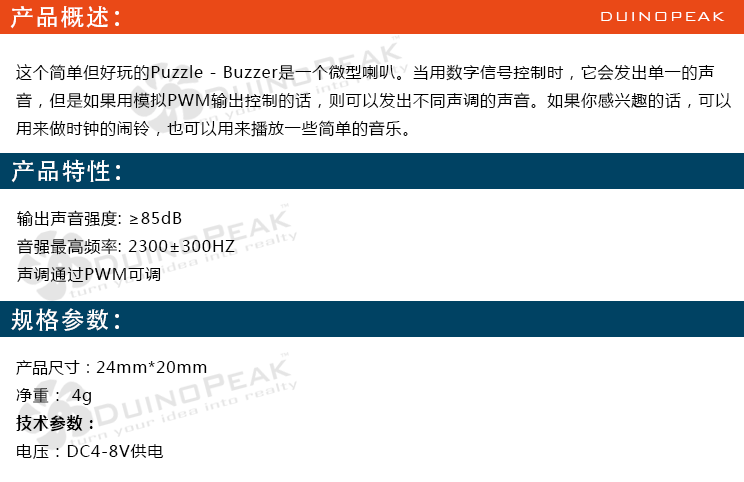
<style>
.page{position:relative;width:744px;height:482px;background:#ffffff}
.page>*{position:absolute;margin:0}
.t1{font:24px "AdobeHeitiStd-Regular";letter-spacing:0.05em;color:#ffffff}
.t2{font:18px "BankGothicBT-Light";letter-spacing:0.05em;color:#ffffff}
.t3{font:16px "MicrosoftYaHei";letter-spacing:0.05em;color:#000000}
.t4{font:16px "MicrosoftYaHei";color:#000000}
.t5{font:16px "MicrosoftYaHei-Bold";letter-spacing:0.05em;color:#000000}
</style>
<div class="page">
<p class="t1" style="left:10px;top:6px;width:109px;height:23px">产品概述：</p>
<p class="t2" style="left:601px;top:12px;width:124px;height:9px">DUINOPEAK</p>
<p class="t3" style="left:16px;top:64px;width:715px;height:73px">这个简单但好玩的Puzzle - Buzzer是一个微型喇叭。当用数字信号控制时，它会发出单一的声<br>音，但是如果用模拟PWM输出控制的话，则可以发出不同声调的声音。如果你感兴趣的话，可以<br>用来做时钟的闹铃，也可以用来播放一些简单的音乐。</p>
<p class="t1" style="left:11px;top:159px;width:109px;height:24px">产品特性：</p>
<p class="t3" style="left:17px;top:210px;width:218px;height:72px">输出声音强度: ≥85dB<br>音强最高频率: 2300±300HZ<br>声调通过PWM可调</p>
<p class="t1" style="left:11px;top:308px;width:108px;height:23px">规格参数：</p>
<p class="t3" style="left:16px;top:360px;width:191px;height:99px"><span class="t4">产品尺寸：</span>24mm*20mm<br>净重： 4g<br><span class="t5">技术参数：<br></span>电压：DC4-8V供电</p>
</div>
